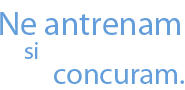
<style>
.page{position:relative;width:185px;height:90px;background:#ffffff}
.page>*{position:absolute;margin:0}
.t1{font:34px "MyriadPro-Regular";color:#639edb}
.t2{font:24px "MyriadPro-Regular";color:#639edb}
.t3{font:30px "MyriadPro-Regular";color:#639edb}
</style>
<div class="page">
<p class="t1" style="left:0px;top:12px;width:180px;height:23px">Ne antrenam</p>
<p class="t2" style="left:24px;top:42px;width:14px;height:17px">si</p>
<p class="t3" style="left:54px;top:69px;width:130px;height:15px">concuram.</p>
</div>
